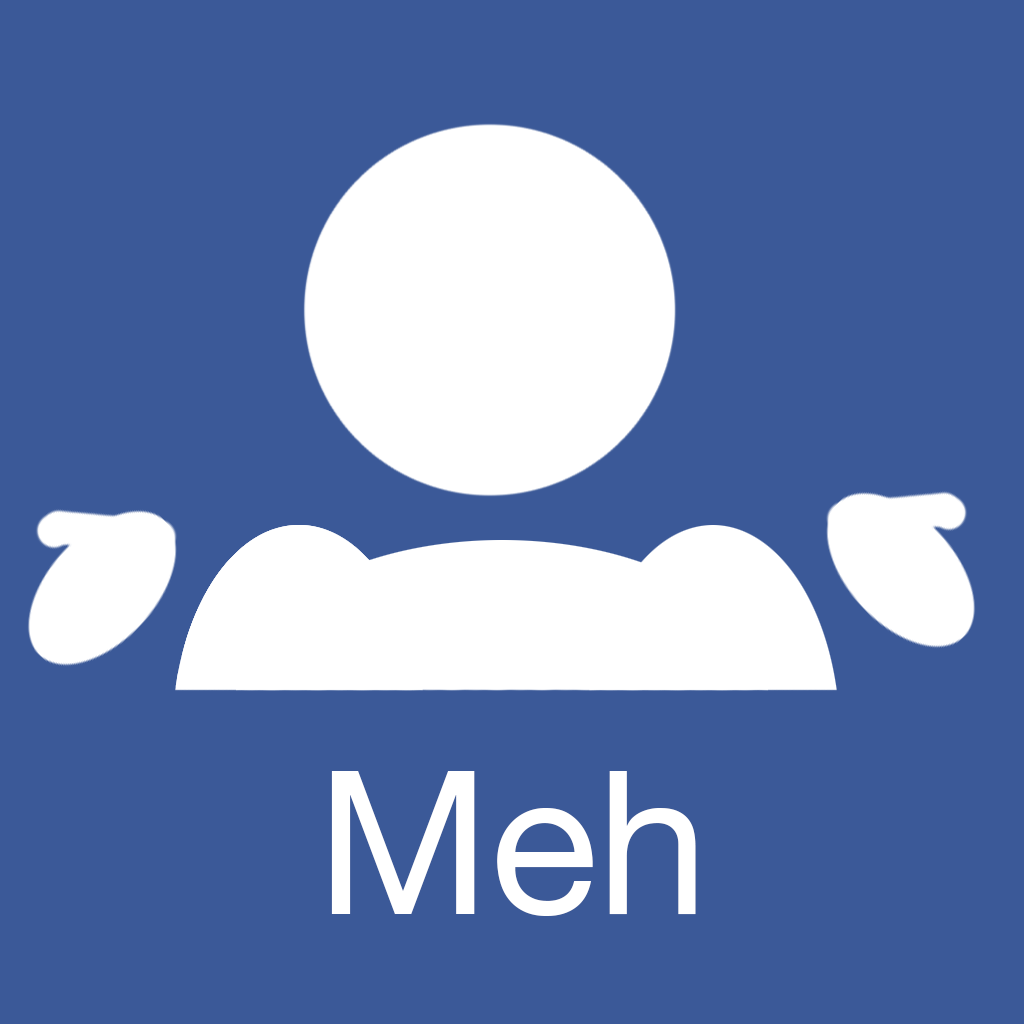
<style>
.page{position:relative;width:1024px;height:1024px;background:#3b5998}
.page>*{position:absolute;margin:0}
.t1{font:200px "HelveticaNeue";color:#ffffff}
</style>
<div class="page">
<p class="t1" style="left:331px;top:771px;width:365px;height:145px">Meh</p>
</div>
